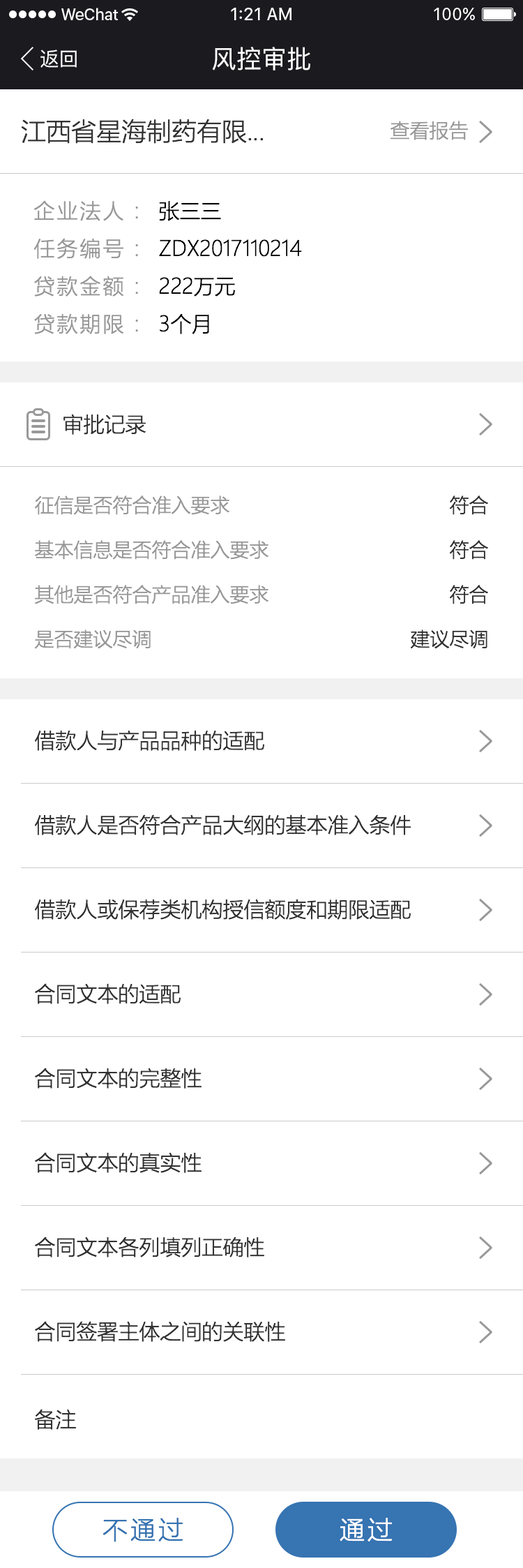
<style>
.page{position:relative;width:523px;height:1568px;background:#ffffff}
.page>*{position:absolute;margin:0}
.t1{font:19.5px "PingFang-SC-Medium";color:#ffffff}
.t2{font:25.1px "PingFang-SC-Medium";color:#ffffff}
.t3{font:25.1px "MicrosoftYaHeiLight";color:#333333}
.t4{font:19.5px "MicrosoftYaHeiLight";color:#999999}
.t5{font:20.9px/40.5px "MicrosoftYaHeiLight";letter-spacing:0.1em;color:#999999}
.t6{font:20.9px/40.5px "MicrosoftYaHeiLight";color:#000000}
.t7{font:20.9px "MicrosoftYaHeiLight";color:#333333}
.t8{font:19.5px/47.5px "MicrosoftYaHeiLight";color:#999999}
.t9{font:19.5px/47.5px "MicrosoftYaHeiLight";color:#333333}
.t10{font:25.1px "MicrosoftYaHeiLight";letter-spacing:0.1em;color:#3674b2}
.t11{font:25.1px "MicrosoftYaHeiLight";letter-spacing:0.1em;color:#ffffff}
</style>
<div class="page">
<p class="t1" style="left:40px;top:50px;width:37px;height:18px">返回</p>
<p class="t2" style="left:212px;top:47px;width:99px;height:23px">风控审批</p>
<p class="t3" style="left:21px;top:119px;width:243px;height:25px">江西省星海制药有限...</p>
<p class="t4" style="left:391px;top:121px;width:77px;height:19px">查看报告</p>
<p class="t5" style="left:33px;top:200px;width:105px;height:134px">企业法人 :<br>任务编号 :<br>贷款金额 :<br>贷款期限 :</p>
<p class="t6" style="left:159px;top:201px;width:143px;height:133px">张三三<br>ZDX2017110214<br>222万元<br>3个月</p>
<p class="t7" style="left:64px;top:414px;width:82px;height:21px">审批记录</p>
<p class="t8" style="left:34px;top:495px;width:235px;height:154px">征信是否符合准入要求<br>基本信息是否符合准入要求<br>其他是否符合产品准入要求<br>是否建议尽调</p>
<p class="t9" style="left:410px;top:495px;width:78px;height:154px;text-align:right">符合<br>符合<br>符合<br>建议尽调</p>
<p class="t7" style="left:34px;top:730px;width:230px;height:21px">借款人与产品品种的适配</p>
<p class="t7" style="left:34px;top:814px;width:378px;height:21px">借款人是否符合产品大纲的基本准入条件</p>
<p class="t7" style="left:34px;top:899px;width:377px;height:21px">借款人或保荐类机构授信额度和期限适配</p>
<p class="t7" style="left:35px;top:983px;width:146px;height:21px">合同文本的适配</p>
<p class="t7" style="left:35px;top:1068px;width:167px;height:21px">合同文本的完整性</p>
<p class="t7" style="left:35px;top:1152px;width:167px;height:21px">合同文本的真实性</p>
<p class="t7" style="left:35px;top:1237px;width:229px;height:20px">合同文本各列填列正确性</p>
<p class="t7" style="left:35px;top:1321px;width:250px;height:21px">合同签署主体之间的关联性</p>
<p class="t7" style="left:34px;top:1409px;width:42px;height:21px">备注</p>
<p class="t10" style="left:103px;top:1518px;width:80px;height:24px">不通过</p>
<p class="t11" style="left:340px;top:1518px;width:52px;height:23px">通过</p>
</div>
